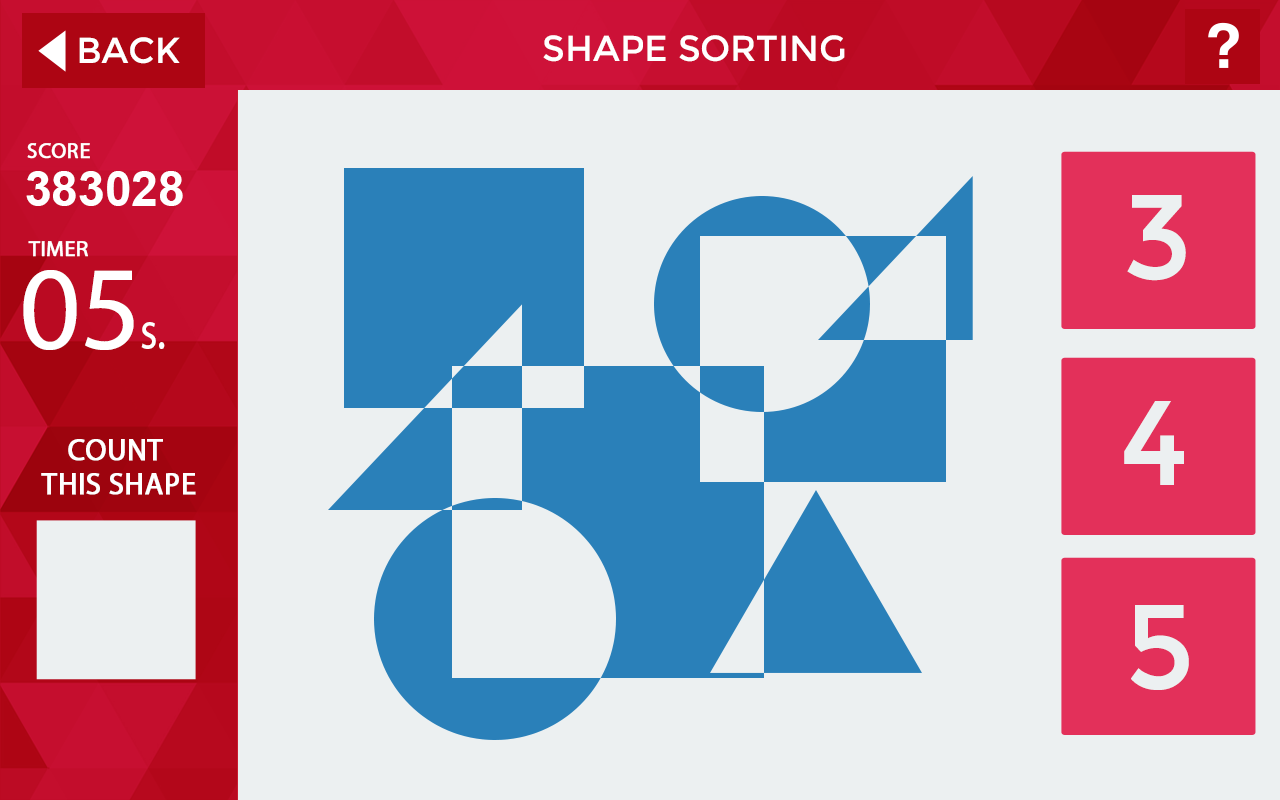
<style>
.page{position:relative;width:1280px;height:800px;background:#ecf0f1}
.page>*{position:absolute;margin:0}
.t1{font:36px "Montserrat-Regular";color:#ffffff}
.t2{font:36px "Montserrat-Regular";color:#ffffff;text-transform:uppercase}
.t3{font:22px "MyriadPro-Regular";color:#ffffff;font-weight:bold}
.t4{font:48px "Arial-BoldMT";color:#ffffff}
.t5{font:120px "Montserrat-Regular";color:#ecf0f1}
.t6{font:120px "MyriadPro-Regular";color:#ffffff}
.t7{font:55px "MyriadPro-Regular";color:#ffffff;scale:0.8 1}
.t8{font:30px/34px "MyriadPro-Regular";color:#ffffff;text-transform:uppercase;font-weight:bold}
</style>
<div class="page">
<p class="t1" style="left:79px;top:37px;width:101px;height:27px">BACK</p>
<p class="t2" style="left:543px;top:35px;width:302px;height:27px">Shape Sorting</p>
<p class="t3" style="left:27px;top:143px;width:63px;height:16px">SCORE</p>
<p class="t4" style="left:26px;top:171px;width:157px;height:35px">383028</p>
<p class="t5" style="left:1127px;top:195px;width:59px;height:86px">3</p>
<p class="t3" style="left:28px;top:241px;width:60px;height:16px">TIMER</p>
<p class="t6" style="left:23px;top:270px;width:111px;height:80px">05</p>
<p class="t7" style="left:141px;top:322px;width:24px;height:27px">s.</p>
<p class="t5" style="left:1124px;top:401px;width:60px;height:84px">4</p>
<p class="t8" style="left:41px;top:439px;width:155px;height:56px;text-align:center">count <br>this shape</p>
<p class="t5" style="left:1131px;top:605px;width:58px;height:85px">5</p>
</div>
